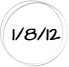
<style>
.page{position:relative;width:69px;height:67px;background:#ffffff}
.page>*{position:absolute;margin:0}
.t1{font:15.5px "ArchitectsDaughter";color:#000000;font-weight:bold}
</style>
<div class="page">
<p class="t1" style="left:12px;top:27px;width:49px;height:14px">1/8/12</p>
</div>
